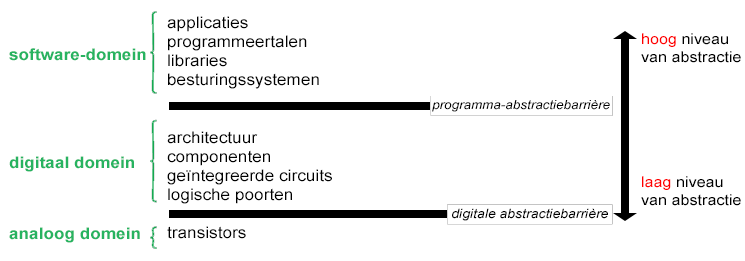
<style>
.page{position:relative;width:745px;height:261px;background:#ffffff}
.page>*{position:absolute;margin:0}
.t1{font:15.9px "ArialMT";color:#000000;scale:1.08 1}
.t2{font:14.9px "ArialMT";color:#000000;scale:1.08 1}
.t3{font:14.9px "ArialMT";color:#ff0000;scale:1.08 1}
.t4{font:15.9px/12px "Arial-BoldMT";color:#27b360;scale:1.08 1}
.t5{font:12.5px "Arial-ItalicMT";color:#000000;scale:1.08 1}
.t6{font:13px "Arial-ItalicMT";color:#000000;scale:1.08 1}
</style>
<div class="page">
<p class="t1" style="left:167px;top:16px;width:165px;height:223px">applicaties<br>programmeertalen<br>libraries<br>besturingssystemen<br><br><br>architectuur<br>componenten<br>geïntegreerde circuits<br>logische poorten<br><br>transistors</p>
<p class="t2" style="left:641px;top:33px;width:100px;height:173px"><span class="t3">hoog</span> niveau<br>van abstractie<br><br><br><br><br><br><br><span class="t3">laag</span> niveau<br>van abstractie</p>
<p class="t4" style="left:9px;top:48px;width:137px;height:195px">software-domein<br><br><br><br><br><br><br><br><br>digitaal domein<br><br><br><br><br><br>analoog domein</p>
<p class="t5" style="left:432px;top:100px;width:178px;height:12px">programma-abstractiebarrière</p>
<p class="t6" style="left:452px;top:208px;width:156px;height:13px">digitale abstractiebarrière</p>
</div>
